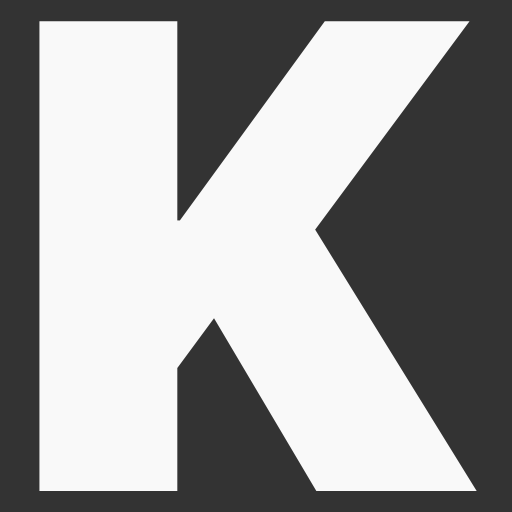
<style>
.page{position:relative;width:512px;height:512px;background:#f9f9f9}
.page>*{position:absolute;margin:0}
.t1{font:666.7px "SFProDisplay-Black";color:#f9f9f9}
</style>
<div class="page">
<p class="t1" style="left:39px;top:21px;width:438px;height:470px">K</p>
</div>
